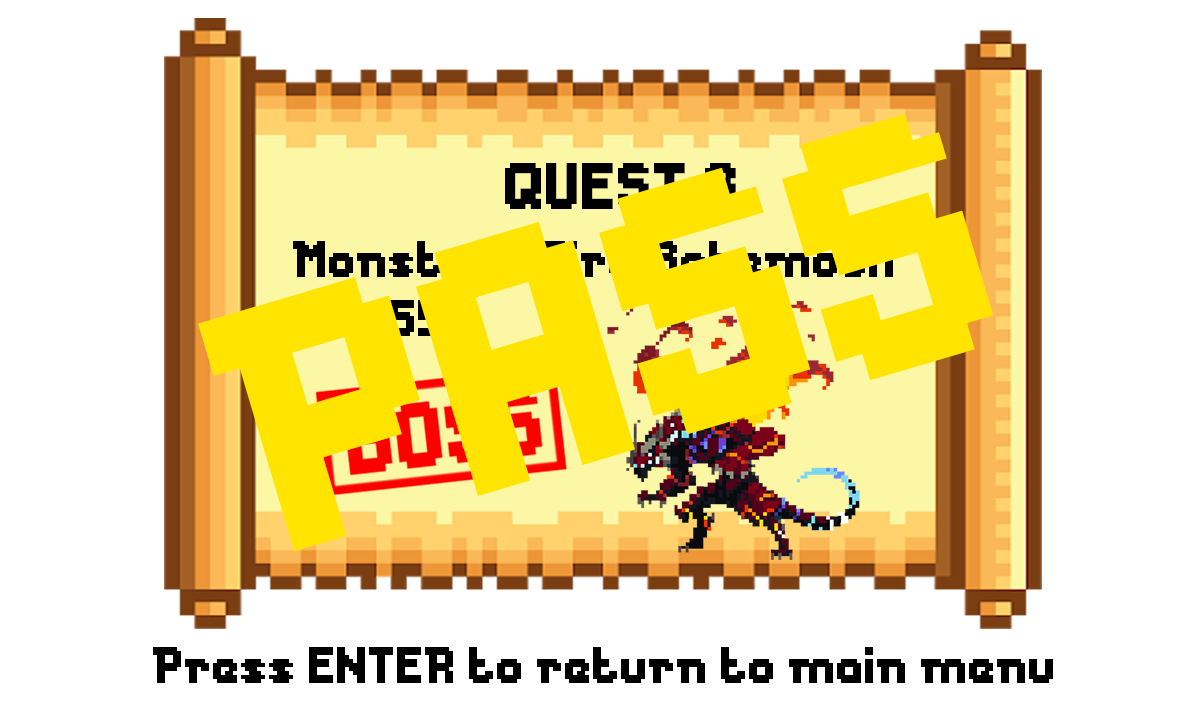
<style>
.page{position:relative;width:1200px;height:720px;background:#ffffff}
.page>*{position:absolute;margin:0}
.t1{font:327.3px "Messe-Duesseldorf";color:#ffe400}
.t2{font:61.3px "Messe-Duesseldorf";color:#000000}
.t3{font:48px "Messe-Duesseldorf"}
.t4{font:48px "Messe-Duesseldorf";color:#ffe400}
.t5{font:48px "Messe-Duesseldorf";color:#000000}
</style>
<div class="page">
<p class="t1" style="left:198px;top:113px;width:796px;height:439px;rotate:-17deg">PASS</p>
<p class="t2" style="left:505px;top:163px;width:231px;height:46px">QUEST 3</p>
<p class="t3" style="left:293px;top:241px;width:600px;height:36px">Monster : Fire Behemoth</p>
<p class="t4" style="left:294px;top:300px;width:148px;height:36px">HP : 55</p>
<p class="t5" style="left:153px;top:647px;width:900px;height:36px">Press ENTER to return to main menu</p>
</div>
